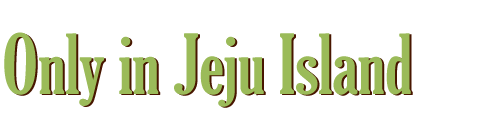
<style>
.page{position:relative;width:500px;height:120px;background:#ffffff}
.page>*{position:absolute;margin:0}
.t1{font:80px "GloucesterMT-ExtraCondensed";color:#9bbb59}
</style>
<div class="page">
<p class="t1" style="left:4px;top:32px;width:407px;height:75px">Only in Jeju Island</p>
<p class="t1" style="left:6px;top:33px;width:407px;height:75px">Only in Jeju Island</p>
</div>
